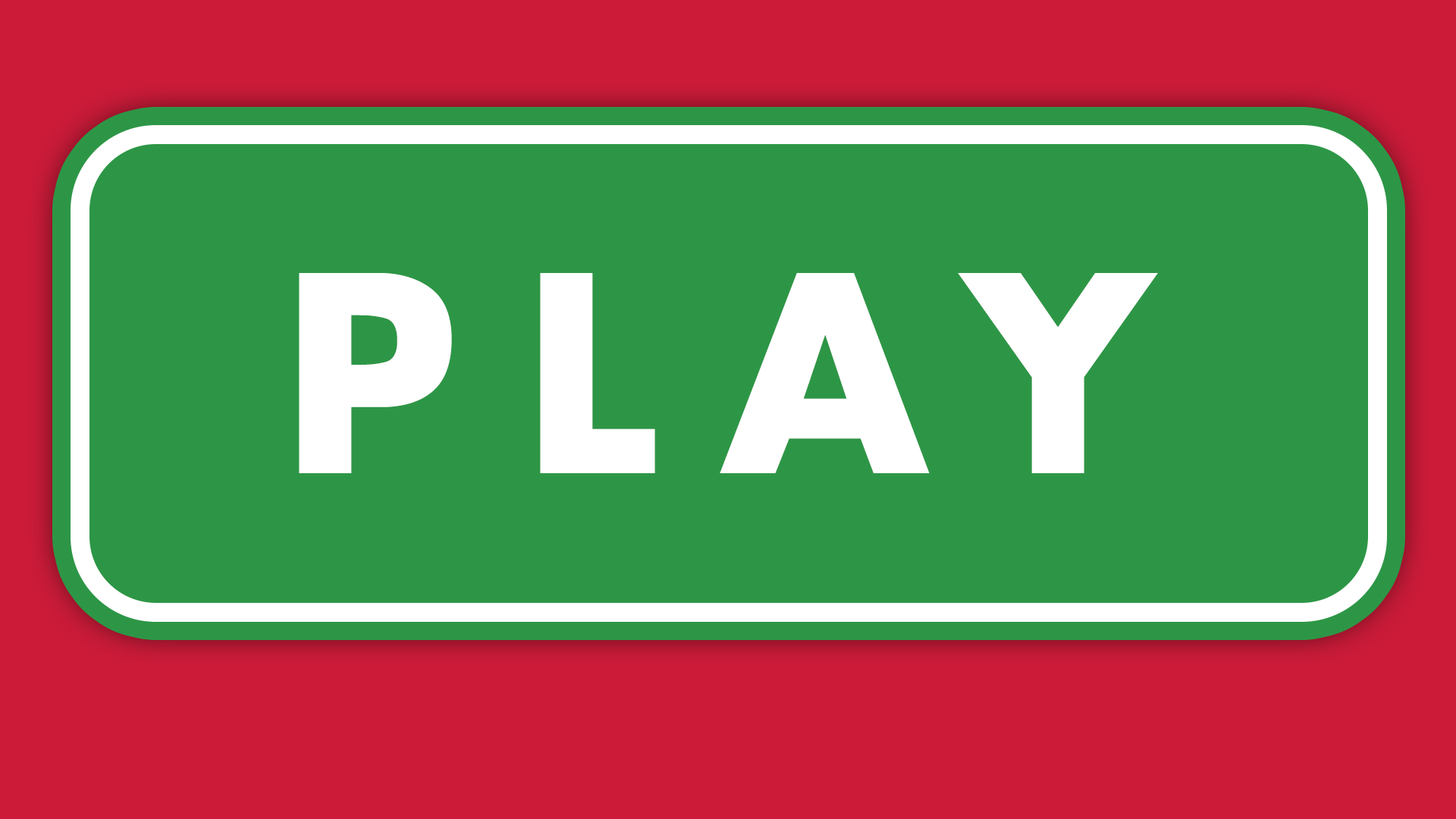
<style>
.page{position:relative;width:1456px;height:819px;background:#2d9646}
.page>*{position:absolute;margin:0}
.t1{font:265.4px "Futura-Bold";letter-spacing:0.25em;color:#ffffff}
</style>
<div class="page">
<p class="t1" style="left:299px;top:273px;width:859px;height:200px">PLAY</p>
</div>
